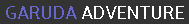
<style>
.page{position:relative;width:189px;height:24px;background:#333333}
.page>*{position:absolute;margin:0}
.t1{font:19px "Amble-Regular";letter-spacing:-0.025em;color:#ffffff}
.t2{font:19px "Amble-Regular";letter-spacing:-0.025em;color:#6666cc}
</style>
<div class="page">
<p class="t1" style="left:6px;top:6px;width:178px;height:13px"><span class="t2">GARUDA </span>ADVENTURE</p>
</div>
